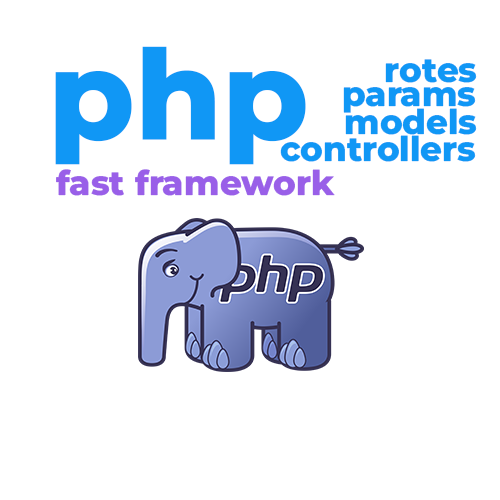
<style>
.page{position:relative;width:500px;height:500px;background:#ffffff}
.page>*{position:absolute;margin:0}
.t1{font:125px "MontserratRoman-ExtraBold";color:#1097f5}
.t2{font:34px "MontserratRoman-ExtraBold";color:#1097f5}
.t3{font:34px "MontserratRoman-ExtraBold";color:#995fe8}
</style>
<div class="page">
<p class="t1" style="left:55px;top:46px;width:251px;height:119px">php</p>
<p class="t2" style="left:385px;top:59px;width:92px;height:24px">rotes</p>
<p class="t2" style="left:343px;top:87px;width:133px;height:26px">params</p>
<p class="t2" style="left:345px;top:108px;width:132px;height:27px">models</p>
<p class="t2" style="left:280px;top:135px;width:196px;height:27px">controllers</p>
<p class="t3" style="left:56px;top:169px;width:279px;height:27px">fast framework</p>
</div>
